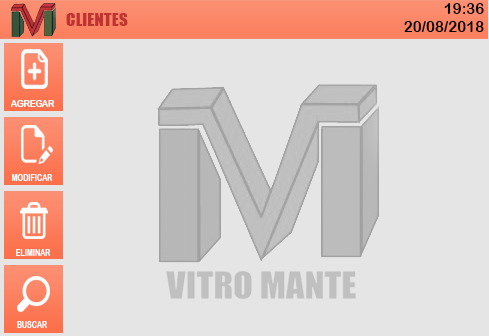
<style>
.page{position:relative;width:489px;height:336px;background:#e5e5e5}
.page>*{position:absolute;margin:0}
.t1{font:14.7px "ArialRoundedMTBold";color:#000000;scale:1.03 1}
.t2{font:17.3px "Impact";color:#c13331}
.t3{font:9.8px "ArialRoundedMTBold";color:#ffffff;scale:0.87 1}
.t4{font:10.2px "ArialRoundedMTBold";color:#ffffff;scale:0.68 1}
</style>
<div class="page">
<p class="t1" style="left:444px;top:3px;width:40px;height:11px">19:36</p>
<p class="t2" style="left:66px;top:13px;width:62px;height:13px">CLIENTES</p>
<p class="t1" style="left:404px;top:21px;width:80px;height:11px">20/08/2018</p>
<p class="t3" style="left:10px;top:100px;width:45px;height:7px">AGREGAR</p>
<p class="t4" style="left:12px;top:174px;width:41px;height:7px">MODIFICAR</p>
<p class="t4" style="left:16px;top:249px;width:35px;height:7px">ELIMINAR</p>
<p class="t4" style="left:17px;top:321px;width:30px;height:7px">BUSCAR</p>
</div>
